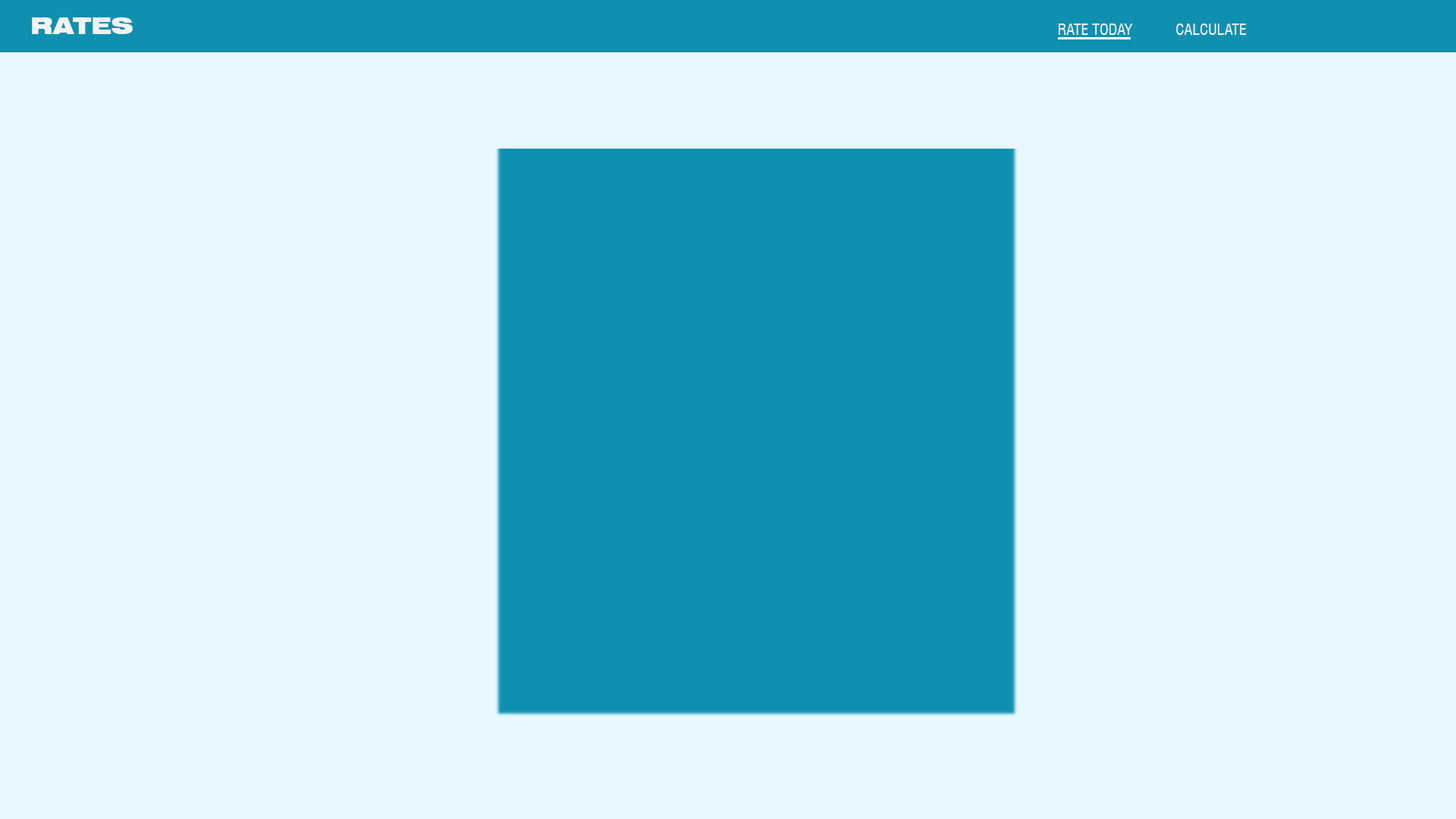
<style>
.page{position:relative;width:1456px;height:819px;background:#e8f8ff}
.page>*{position:absolute;margin:0}
.t1{font:22.7px "Swiss721BT-BlackExtended";color:#f3f3f3}
.t2{font:15.2px "Swiss721BT-RomanCondensed";color:#f3f3f3}
</style>
<div class="page">
<p class="t1" style="left:32px;top:17px;width:101px;height:17px">RATES</p>
<p class="t2" style="left:1059px;top:24px;width:74px;height:11px">RATE TODAY</p>
<p class="t2" style="left:1176px;top:24px;width:70px;height:11px">CALCULATE</p>
</div>
